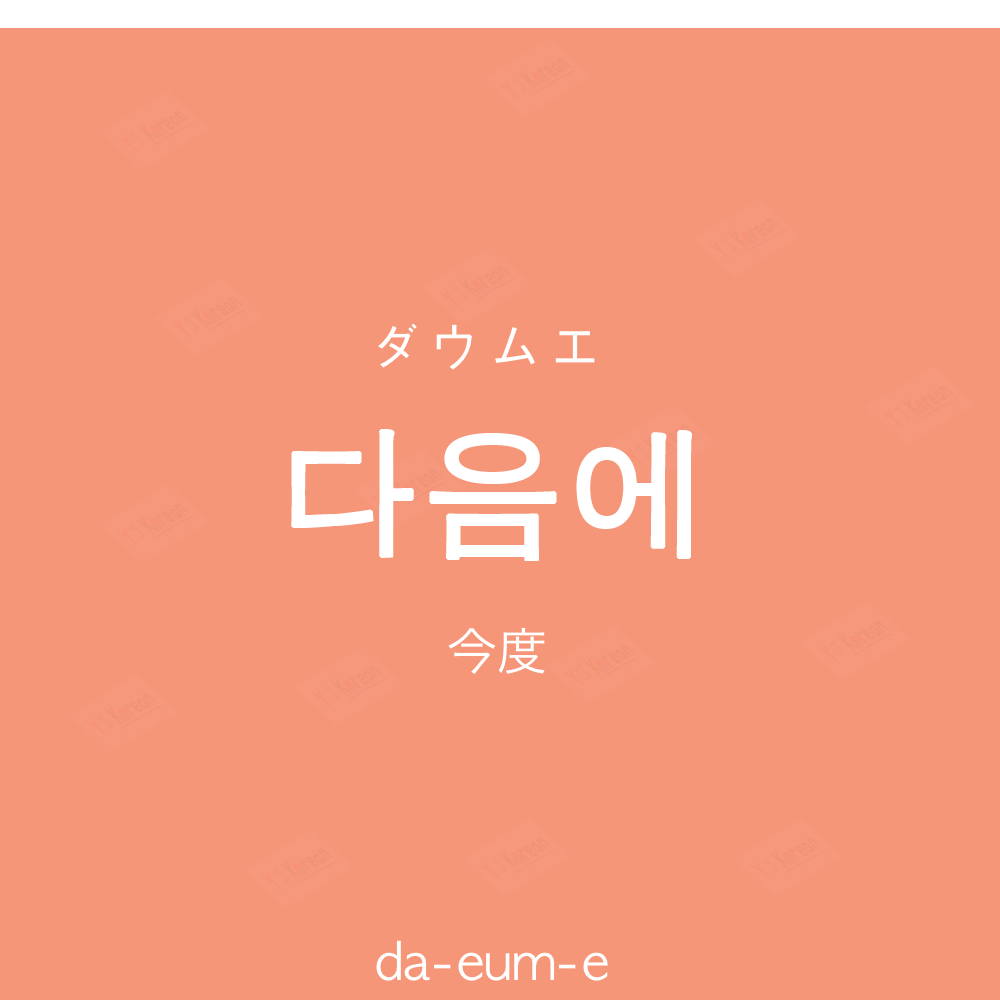
<style>
.page{position:relative;width:1000px;height:1000px;background:#f69679}
.page>*{position:absolute;margin:0}
.t1{font:60px "AppleGothic";color:#ffffff}
.t2{font:140px "AppleGothic";color:#ffffff;font-weight:bold}
.t3{font:50px "HiraKakuProN-W3";color:#ffffff}
.t4{font:50px "AppleGothic";color:#ffffff}
</style>
<div class="page">
<p class="t1" style="left:378px;top:323px;width:217px;height:47px">ダウムエ</p>
<p class="t2" style="left:291px;top:429px;width:401px;height:132px">다음에</p>
<p class="t3" style="left:448px;top:627px;width:97px;height:47px">今度</p>
<p class="t4" style="left:376px;top:940px;width:232px;height:41px">da-eum-e</p>
</div>
